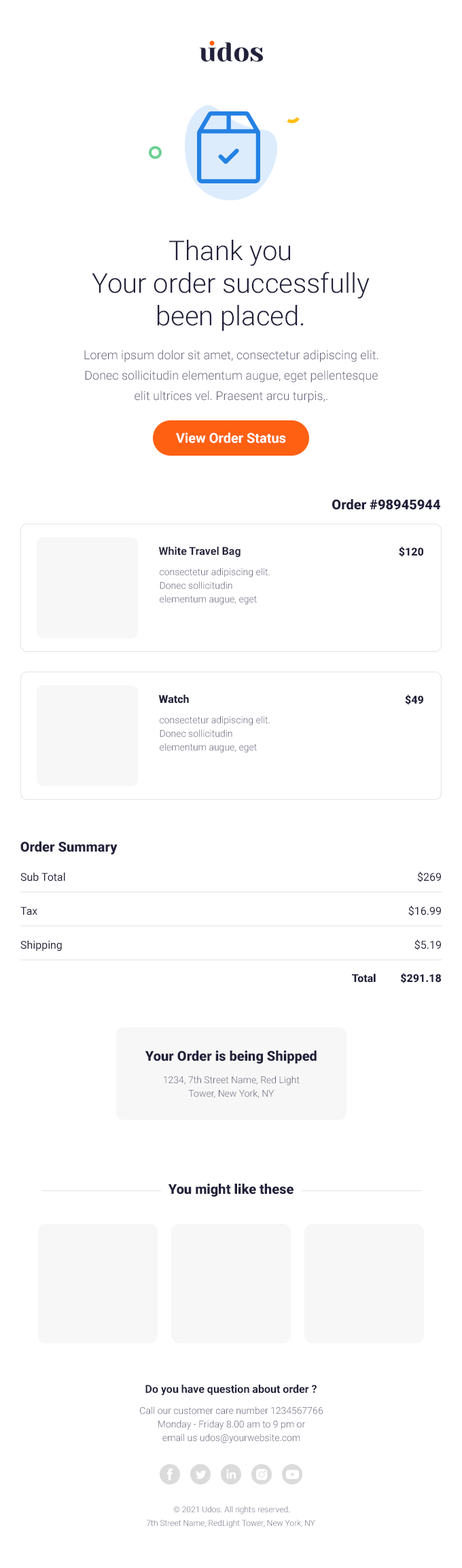
<style>
.page{position:relative;width:462px;height:1568px;background:#ffffff}
.page>*{position:absolute;margin:0}
.t1{font:27.2px "Roboto-Light";color:#21213b}
.t2{font:12.2px/20.4px "Roboto-Light";color:#66667e}
.t3{font:13.6px "Roboto-Bold";color:#ffffff}
.t4{font:13.6px "Roboto-Black";color:#21213b}
.t5{font:10.9px "Roboto-Black";color:#21213b}
.t6{font:10.9px "Roboto-Bold";color:#21213b}
.t7{font:9.5px/13.6px "Roboto-Light";color:#66667e}
.t8{font:10.9px "Roboto-Regular";color:#21213b}
.t9{font:8.1px/13.6px "Roboto-Light";color:#66667e}
</style>
<div class="page">
<p class="t1" style="left:92px;top:240px;width:277px;height:91px;text-align:center">Thank you<br>Your order successfully<br>been placed.</p>
<p class="t2" style="left:84px;top:350px;width:294px;height:53px;text-align:center">Lorem ipsum dolor sit amet, consectetur adipiscing elit. Donec sollicitudin elementum augue, eget pellentesque elit ultrices vel. Praesent arcu turpis,.</p>
<p class="t3" style="left:176px;top:433px;width:110px;height:10px">View Order Status</p>
<p class="t4" style="left:332px;top:499px;width:108px;height:11px">Order #98945944</p>
<p class="t5" style="left:399px;top:546px;width:24px;height:11px">$120</p>
<p class="t6" style="left:158px;top:547px;width:82px;height:11px">White Travel Bag</p>
<p class="t7" style="left:160px;top:568px;width:110px;height:36px">consectetur adipiscing elit. Donec sollicitudin elementum augue, eget</p>
<p class="t5" style="left:158px;top:695px;width:31px;height:9px">Watch</p>
<p class="t5" style="left:405px;top:694px;width:18px;height:11px">$49</p>
<p class="t7" style="left:160px;top:716px;width:110px;height:36px">consectetur adipiscing elit. Donec sollicitudin elementum augue, eget</p>
<p class="t4" style="left:20px;top:841px;width:97px;height:14px">Order Summary</p>
<p class="t8" style="left:20px;top:873px;width:45px;height:8px">Sub Total</p>
<p class="t8" style="left:417px;top:871px;width:24px;height:11px">$269</p>
<p class="t8" style="left:408px;top:905px;width:33px;height:11px">$16.99</p>
<p class="t8" style="left:20px;top:907px;width:17px;height:8px">Tax</p>
<p class="t8" style="left:20px;top:941px;width:42px;height:10px">Shipping</p>
<p class="t8" style="left:414px;top:939px;width:27px;height:11px">$5.19</p>
<p class="t5" style="left:352px;top:974px;width:24px;height:9px">Total</p>
<p class="t5" style="left:401px;top:972px;width:40px;height:11px">$291.18</p>
<p class="t4" style="left:145px;top:1051px;width:171px;height:13px">Your Order is being Shipped</p>
<p class="t7" style="left:164px;top:1076px;width:135px;height:22px;text-align:center">1234, 7th Street Name, Red Light<br>Tower, New York, NY</p>
<p class="t4" style="left:168px;top:1184px;width:125px;height:13px">You might like these</p>
<p class="t6" style="left:145px;top:1385px;width:171px;height:11px">Do you have question about order ?</p>
<p class="t7" style="left:140px;top:1406px;width:183px;height:37px;text-align:center">Call our customer care number 1234567766<br>Monday - Friday 8.00 am to 9 pm or <br>email us udos@yourwebsite.com</p>
<p class="t9" style="left:147px;top:1506px;width:168px;height:22px;text-align:center">© 2021 Udos. All rights reserved.<br>7th Street Name, RedLight Tower, New York, NY</p>
</div>
